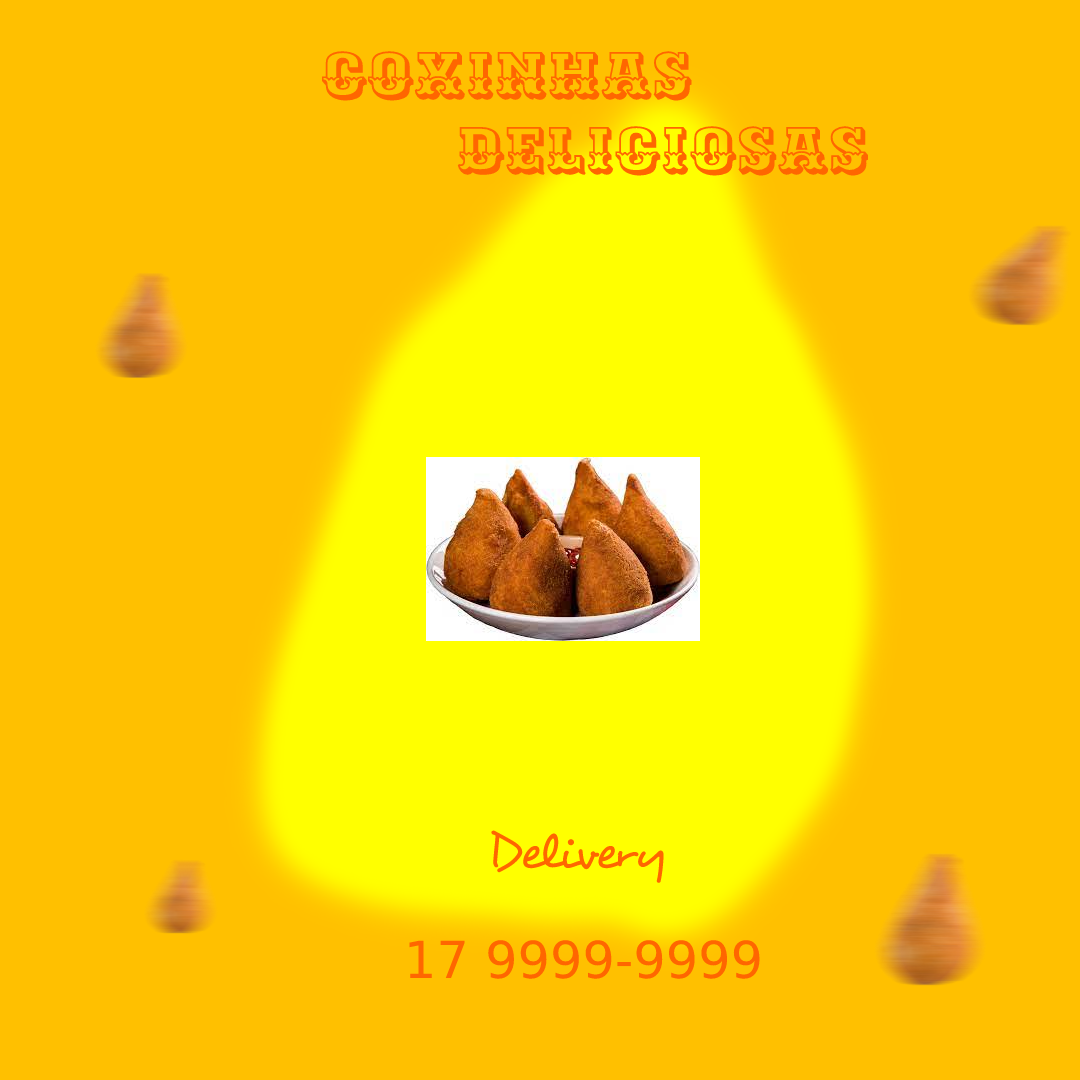
<style>
.page{position:relative;width:1080px;height:1080px;background:#ffc000}
.page>*{position:absolute;margin:0}
.t1{font:62.8px "Ewert-Regular";color:#ff6600}
.t2{font:62.8px "DejaVuSans";color:#000000}
.t3{font:51px "Desyrel";color:#ff6600}
.t4{font:51px "DejaVuSans";color:#ff6600}
</style>
<div class="page">
<p class="t1" style="left:321px;top:51px;width:548px;height:125px"><span class="t2">  </span>Coxinhas<br>       Deliciosas</p>
<p class="t3" style="left:491px;top:830px;width:173px;height:53px"><span class="t4">    </span>Delivery</p>
<p class="t4" style="left:409px;top:940px;width:351px;height:39px">17 9999-9999</p>
</div>
